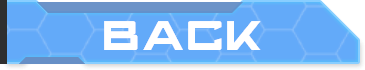
<style>
.page{position:relative;width:365px;height:70px;background:#63aaf9}
.page>*{position:absolute;margin:0}
.t1{font:45.3px "QORE";color:#ffffff}
</style>
<div class="page">
<p class="t1" style="left:104px;top:21px;width:157px;height:29px">BACK</p>
</div>
